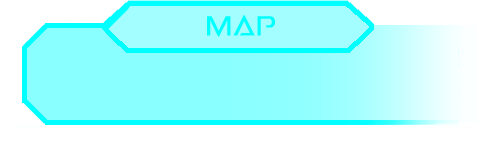
<style>
.page{position:relative;width:489px;height:149px;background:#ffffff}
.page>*{position:absolute;margin:0}
.t1{font:30px "EarthOrbiter";color:#00ffff;font-weight:bold}
</style>
<div class="page">
<p class="t1" style="left:207px;top:15px;width:68px;height:22px">map</p>
</div>
